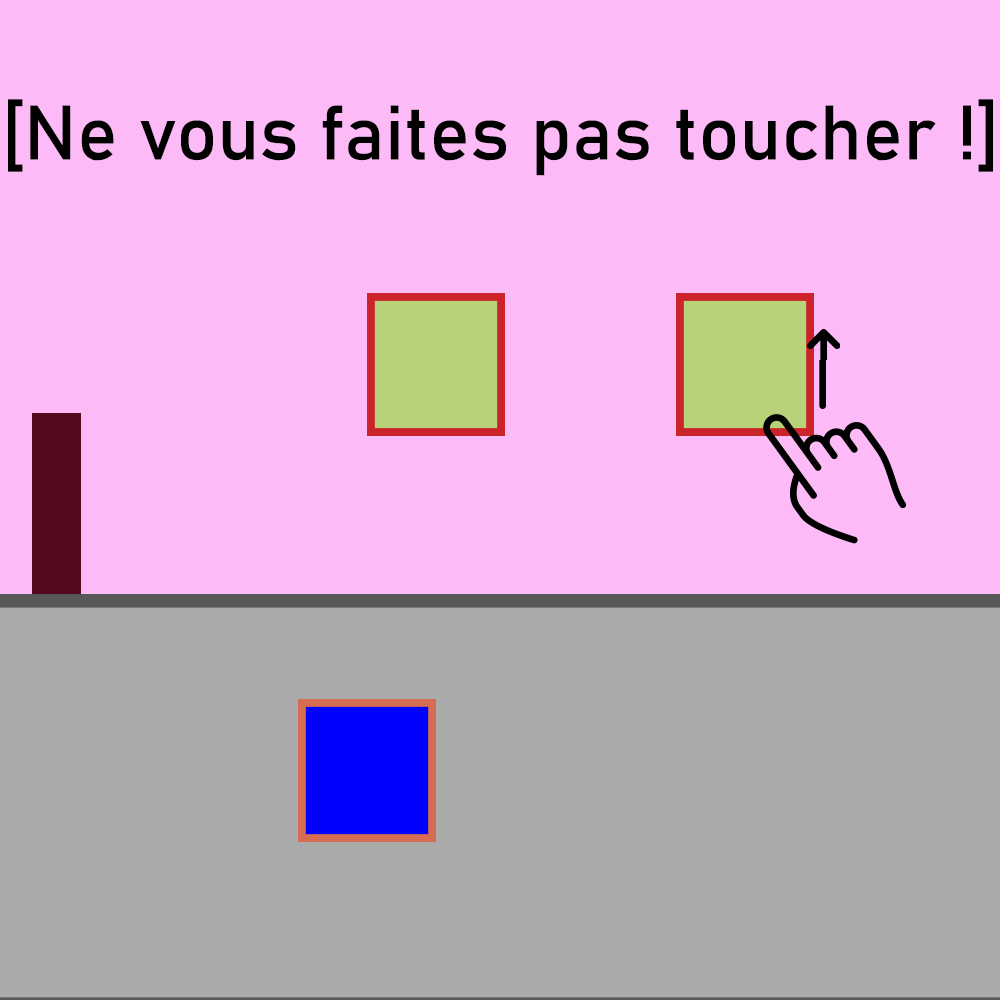
<style>
.page{position:relative;width:1000px;height:1000px;background:#fcbbf6}
.page>*{position:absolute;margin:0}
.t1{font:129.9px "Bahnschrift";letter-spacing:0.005em;color:#000000}
</style>
<div class="page">
<p class="t1" style="left:8px;top:99px;width:985px;height:77px">[Ne vous faites pas toucher !]</p>
</div>
